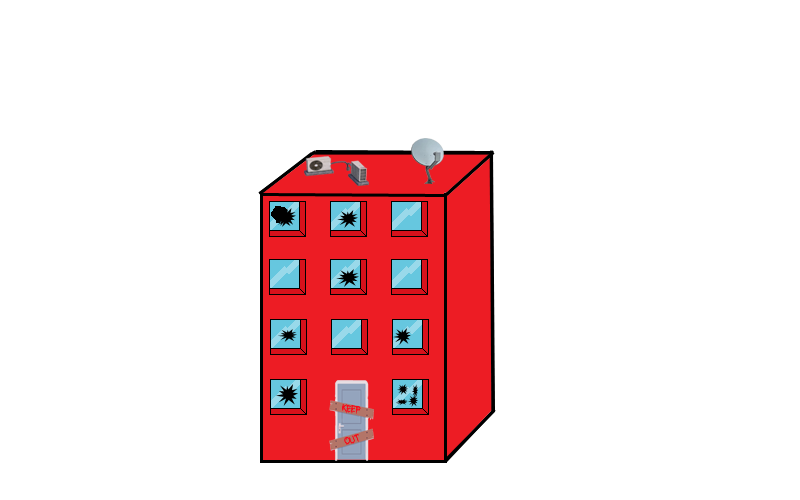
<style>
.page{position:relative;width:800px;height:500px;background:#ffffff}
.page>*{position:absolute;margin:0}
.t1{font:11px "Anti-Everything";color:#f8091a}
</style>
<div class="page">
<p class="t1" style="left:342px;top:404px;width:19px;height:10px;rotate:8deg">keep</p>
<p class="t1" style="left:344px;top:434px;width:15px;height:11px;rotate:-18deg">out</p>
</div>
